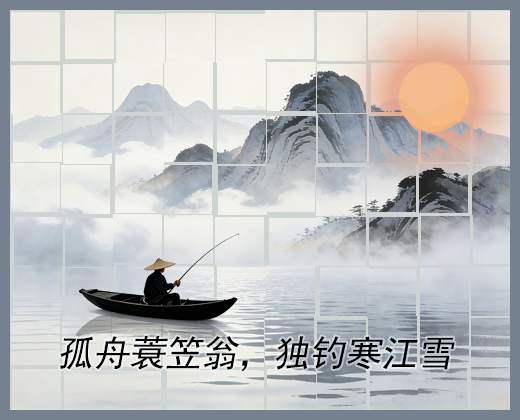
<style>
.page{position:relative;width:520px;height:420px}
.page>*{position:absolute;margin:0}
.t1{font:36px "SimHei";color:#000000;font-style:italic}
</style>
<div class="page">
<p class="t1" style="left:60px;top:336px;width:395px;height:36px">孤舟蓑笠翁，独钓寒江雪</p>
</div>
